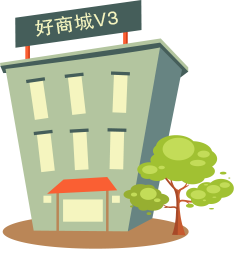
<style>
.page{position:relative;width:238px;height:254px;background:#ffffff}
.page>*{position:absolute;margin:0}
.t1{font:18px "CTHeiTiSJ";letter-spacing:0.05em;color:#f5f5bf;scale:1.06 1}
</style>
<div class="page">
<p class="t1" style="left:35px;top:11px;width:83px;height:26px;rotate:-8deg">好商城V3</p>
</div>
